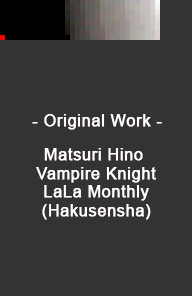
<style>
.page{position:relative;width:192px;height:296px;background:#333333}
.page>*{position:absolute;margin:0}
.t1{font:16px "ArialMT";letter-spacing:0.025em;color:#ffffff;font-weight:bold}
.t2{font:16px/18.7px "ArialMT";letter-spacing:0.025em;color:#ffffff;font-weight:bold}
</style>
<div class="page">
<p class="t1" style="left:32px;top:114px;width:130px;height:16px">- Original Work -</p>
<p class="t2" style="left:36px;top:148px;width:120px;height:72px;text-align:center">Matsuri Hino <br>Vampire Knight<br>LaLa Monthly<br>(Hakusensha)</p>
</div>
